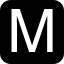
<style>
.page{position:relative;width:64px;height:64px;background:#000000}
.page>*{position:absolute;margin:0}
.t1{font:60px "Helvetica";color:#ffffff}
</style>
<div class="page">
<p class="t1" style="left:11px;top:9px;width:42px;height:43px">M</p>
</div>
